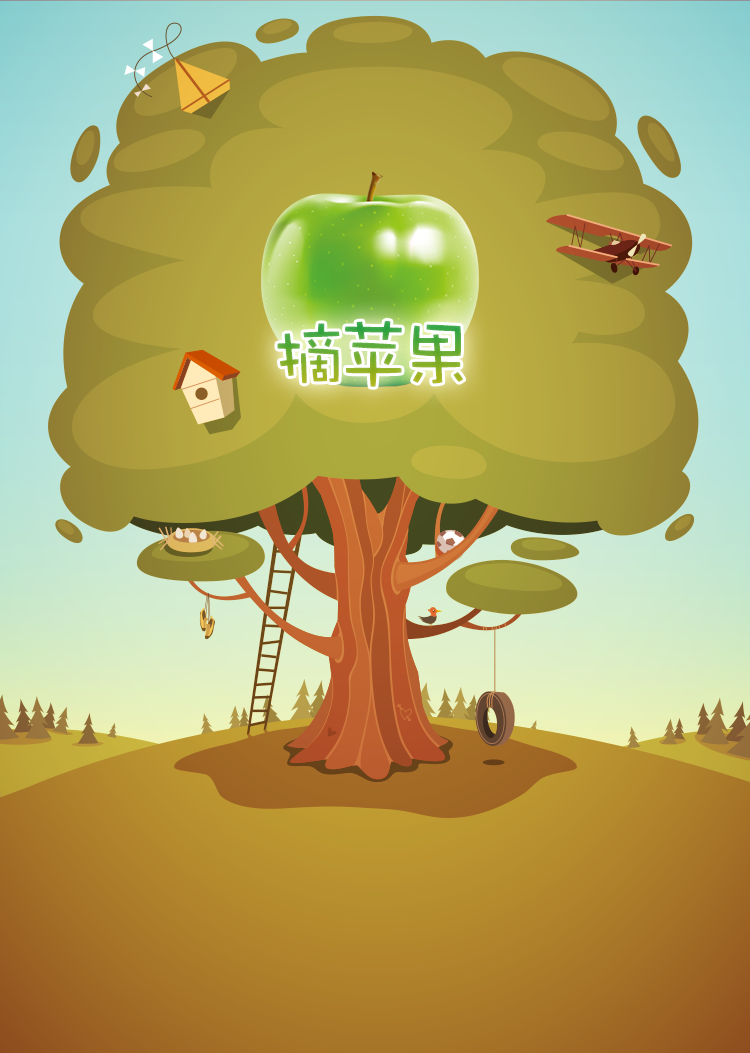
<style>
.page{position:relative;width:750px;height:1053px}
.page>*{position:absolute;margin:0}
.t1{font:80px "DFWaWaSC-W5";letter-spacing:-0.2em}
</style>
<div class="page">
<p class="t1" style="left:277px;top:321px;width:187px;height:66px">摘苹果</p>
</div>
